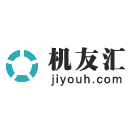
<style>
.page{position:relative;width:133px;height:133px;background:#ffffff}
.page>*{position:absolute;margin:0}
.t1{font:24px "SungtiEG-Ultra-?";letter-spacing:0.12em;color:#292a2a}
.t2{font:12px "ArialMT";letter-spacing:0.12em;color:#292a2a}
</style>
<div class="page">
<p class="t1" style="left:48px;top:47px;width:77px;height:24px">机友汇</p>
<p class="t2" style="left:51px;top:74px;width:71px;height:12px">jiyouh.com</p>
</div>
